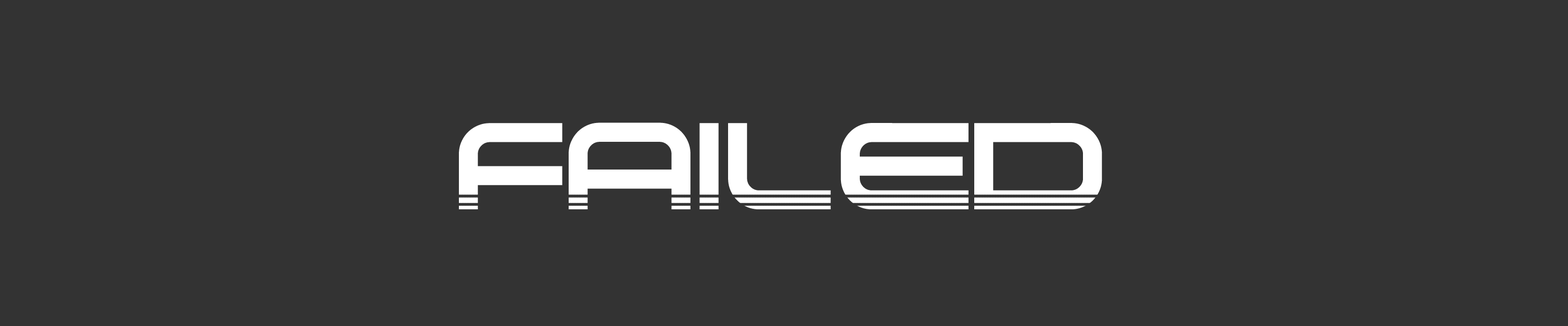
<style>
.page{position:relative;width:1568px;height:326px;background:#333333}
.page>*{position:absolute;margin:0}
.t1{font:156.8px "moonhouse";color:#ffffff}
</style>
<div class="page">
<p class="t1" style="left:459px;top:122px;width:643px;height:87px">FAILED</p>
</div>
